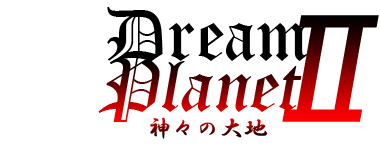
<style>
.page{position:relative;width:380px;height:150px;background:#ffffff}
.page>*{position:absolute;margin:0}
.t1{font:72px "OldEnglishTextMT";color:#000000}
.t2{font:150px "MS-Gothic";font-style:italic}
.t3{font:72px "OldEnglishTextMT";font-style:italic}
.t4{font:72px "OldEnglishTextMT"}
.t5{font:24px "HGSGyoshotai"}
</style>
<div class="page">
<p class="t1" style="left:107px;top:7px;width:201px;height:57px">Dream</p>
<p class="t2" style="left:282px;top:15px;width:97px;height:107px">Ⅱ</p>
<p class="t3" style="left:98px;top:58px;width:204px;height:64px"><span class="t4"><br></span>Planet</p>
<p class="t5" style="left:150px;top:117px;width:118px;height:22px">神々の大地</p>
</div>
